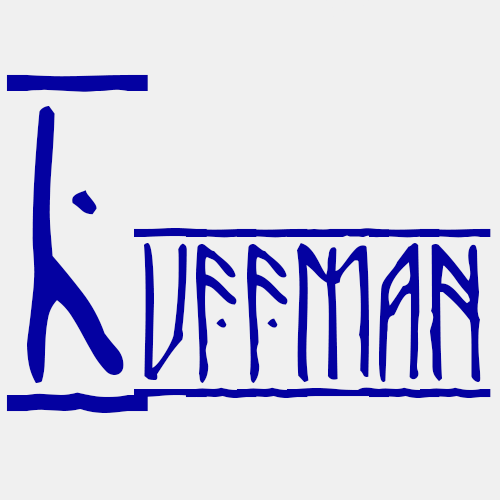
<style>
.page{position:relative;width:500px;height:500px;background:#f0f0f0}
.page>*{position:absolute;margin:0}
.t1{font:200px "Runic";color:#0401a1}
.t2{font:400px "Runic";color:#0401a1}
</style>
<div class="page">
<p class="t1" style="left:6px;top:74px;width:485px;height:339px"><span class="t2">H</span>uffman</p>
</div>
